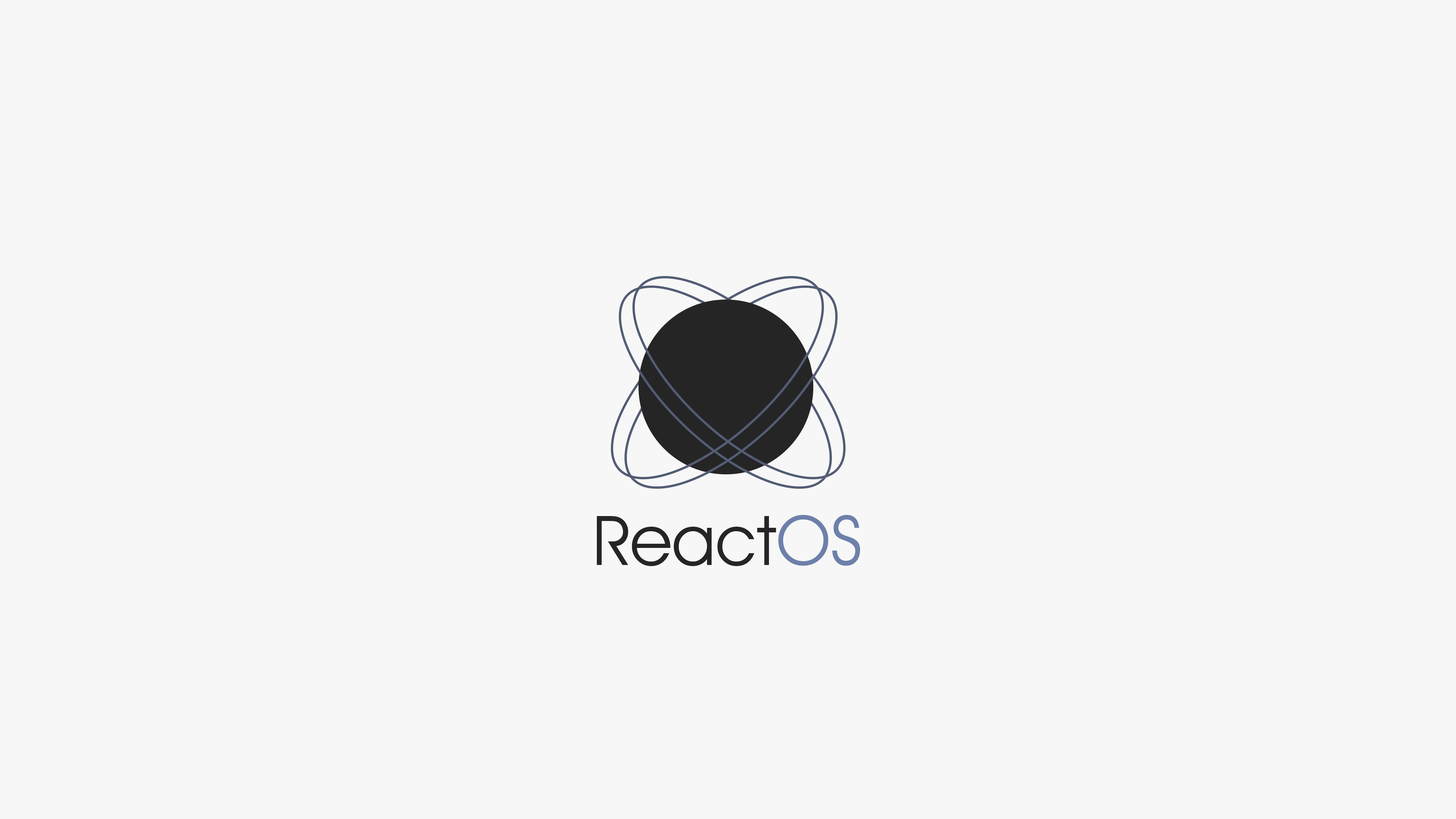
<style>
.page{position:relative;width:1456px;height:819px;background:#f7f7f7}
.page>*{position:absolute;margin:0}
.t1{font:69px "AvantGardeITCbyBT-Book";color:#252525}
.t2{font:69px "AvantGardeITCbyBT-Book";color:#6d80ab}
</style>
<div class="page">
<p class="t1" style="left:597px;top:515px;width:263px;height:51px">React<span class="t2">OS</span></p>
</div>
